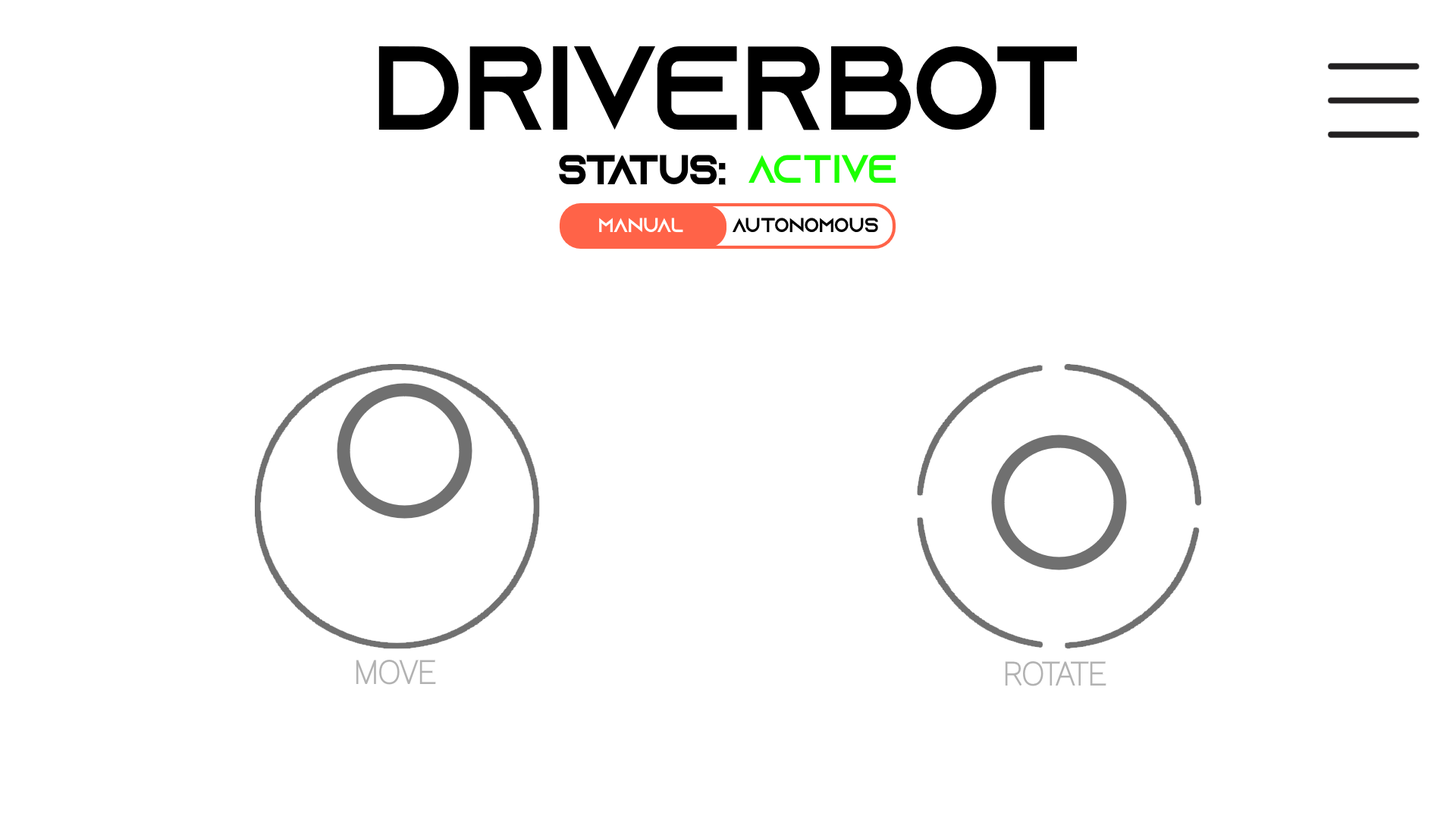
<style>
.page{position:relative;width:1456px;height:819px;background:#ffffff}
.page>*{position:absolute;margin:0}
.t1{font:119.1px "AzonixRegular";color:#000000;scale:0.95 1}
.t2{font:39.6px "AzonixRegular";color:#000000;scale:0.95 1}
.t3{font:39.6px "AzonixRegular";color:#1cff00;scale:0.95 1}
.t4{font:20.2px "AzonixRegular";color:#ffffff;scale:0.95 1}
.t5{font:20.2px "ZenMaruGothic-Regular";color:#000000;scale:0.95 1}
.t6{font:20.2px "AzonixRegular";color:#000000;scale:0.95 1}
.t7{font:33.9px "WorkSans-Hairline";color:#b2b2b2;scale:0.91 1}
</style>
<div class="page">
<p class="t1" style="left:378px;top:46px;width:700px;height:84px">DRiverBot</p>
<p class="t2" style="left:559px;top:155px;width:167px;height:30px">Status:</p>
<p class="t3" style="left:748px;top:155px;width:148px;height:29px">ACTIVE</p>
<p class="t4" style="left:599px;top:218px;width:84px;height:15px"><span class="t5"><br></span>Manual</p>
<p class="t6" style="left:733px;top:218px;width:145px;height:15px"><span class="t5"><br></span>AUtonomous</p>
<p class="t7" style="left:356px;top:660px;width:80px;height:25px">MOVE</p>
<p class="t7" style="left:1005px;top:661px;width:101px;height:25px">ROTATE</p>
</div>
